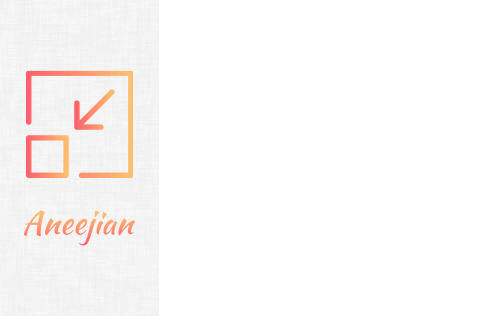
<style>
.page{position:relative;width:500px;height:316px;background:#ffffff}
.page>*{position:absolute;margin:0}
.t1{font:32px "KaushanScript-Regular";color:#ff9b6f}
</style>
<div class="page">
<p class="t1" style="left:24px;top:210px;width:112px;height:36px">Aneejian</p>
</div>
